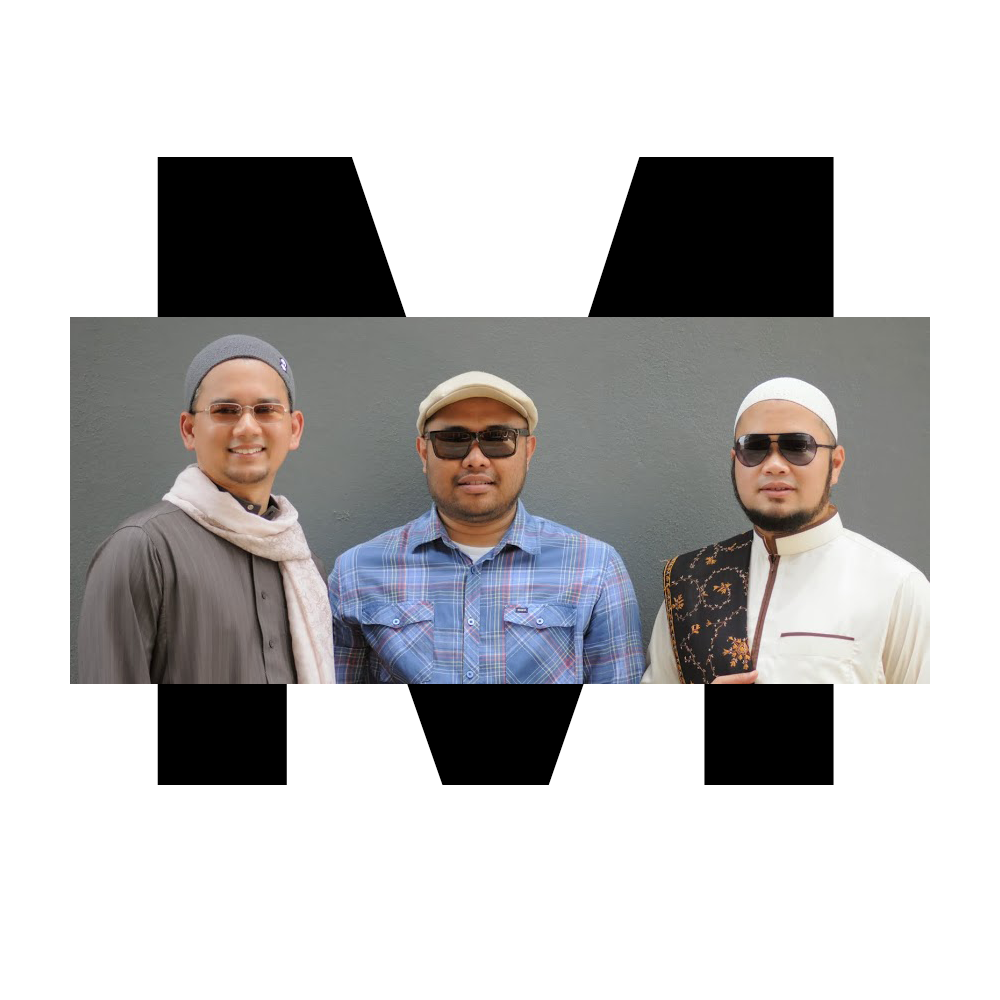
<style>
.page{position:relative;width:1000px;height:1000px;background:#ffffff}
.page>*{position:absolute;margin:0}
.t1{font:878.9px "HelveticaNeue-Bold"}
</style>
<div class="page">
<p class="t1" style="left:157px;top:157px;width:677px;height:628px">M</p>
</div>
